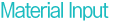
<style>
.page{position:relative;width:129px;height:21px;background:#ffffff}
.page>*{position:absolute;margin:0}
.t1{font:20px "GothicMB101Pro-Regular";letter-spacing:-0.06em;color:#1dbcc0;scale:0.9 1}
</style>
<div class="page">
<p class="t1" style="left:1px;top:2px;width:108px;height:19px">Material Input</p>
</div>
